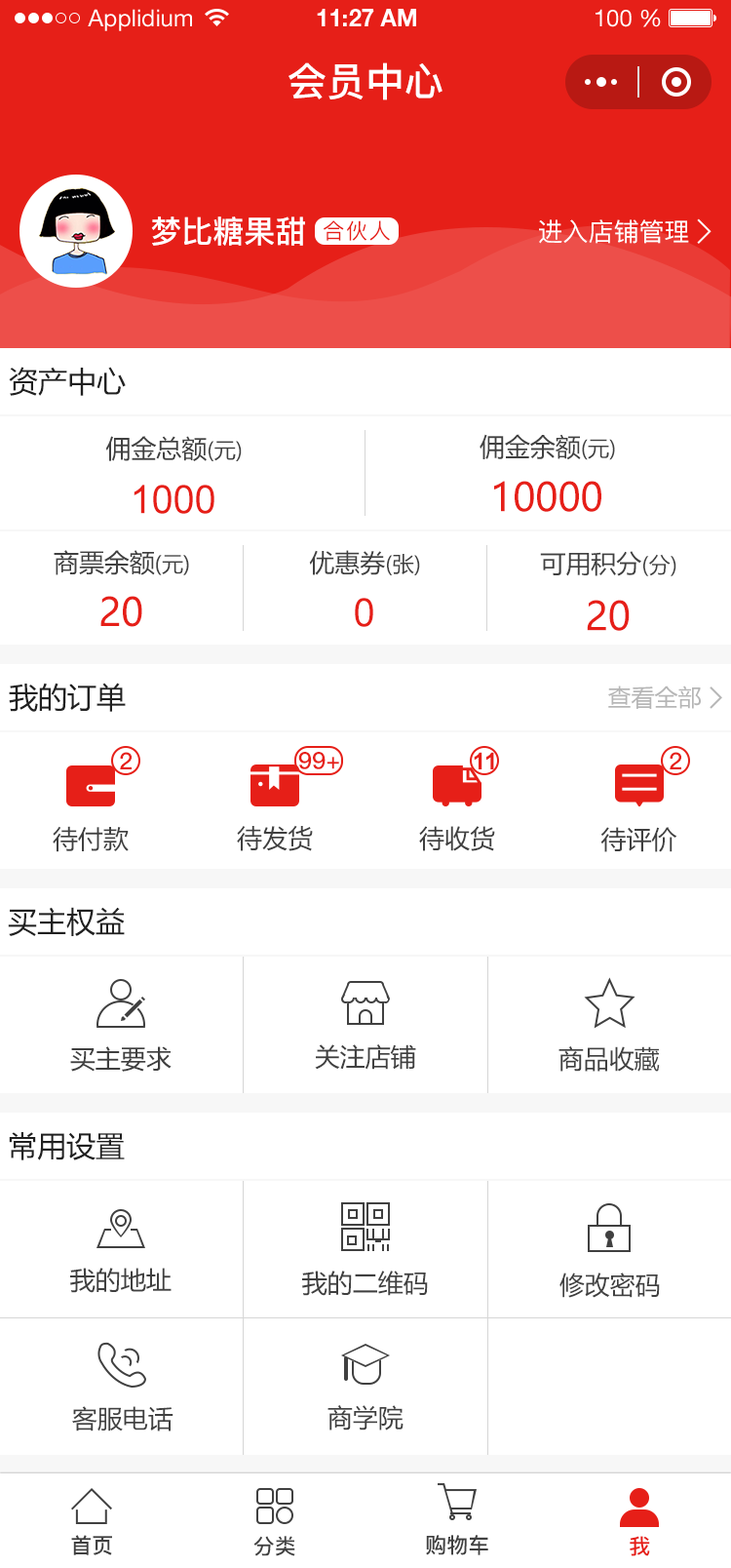
<style>
.page{position:relative;width:731px;height:1568px;background:#ffffff}
.page>*{position:absolute;margin:0}
.t1{font:23.4px "HelveticaNeueLTStd-Roman";color:#ffffff}
.t2{font:23.4px "HelveticaNeueLTStd-Bd";color:#ffffff}
.t3{font:39px "PingFang-SC-Bold";color:#ffffff;text-transform:uppercase}
.t4{font:31.2px "PingFang-SC-Bold";color:#ffffff;text-transform:uppercase}
.t5{font:21.5px "PingFang-SC-Medium";letter-spacing:0.08em;color:#e61f18}
.t6{font:25.4px "PingFang-SC-Medium";color:#ffffff;text-transform:uppercase}
.t7{font:29.3px "MicrosoftYaHei";color:#202020;text-transform:uppercase}
.t8{font:25.4px "MicrosoftYaHei";color:#404040;text-transform:uppercase}
.t9{font:21.5px "MicrosoftYaHei";color:#404040;text-transform:uppercase}
.t10{font:39px "ArialMT";color:#e61f18;text-transform:uppercase}
.t11{font:39px "MicrosoftYaHei";color:#e61f18;text-transform:uppercase}
.t12{font:25.2px "MicrosoftYaHei";color:#404040;text-transform:uppercase}
.t13{font:21.4px "MicrosoftYaHei";color:#404040;text-transform:uppercase}
.t14{font:38.8px "MicrosoftYaHei";color:#e61f18;text-transform:uppercase}
.t15{font:23.4px "MicrosoftYaHei";color:#b6b6b6;text-transform:uppercase}
.t16{font:23.4px "PingFang-SC-Bold";color:#e61f18;text-transform:uppercase}
.t17{font:23.4px "Arial-BoldMT";letter-spacing:-0.05em;color:#e61f18;text-transform:uppercase}
.t18{font:25.3px "MicrosoftYaHei";color:#404040;text-transform:uppercase}
.t19{font:21.5px "PingFang-SC-Bold";color:#404040;text-transform:uppercase}
.t20{font:21.5px "PingFang-SC-Bold";color:#e61f18;text-transform:uppercase}
</style>
<div class="page">
<p class="t1" style="left:88px;top:9px;width:104px;height:22px">Applidium</p>
<p class="t2" style="left:317px;top:9px;width:99px;height:17px">11:27 AM</p>
<p class="t1" style="left:596px;top:9px;width:65px;height:18px">100 %</p>
<p class="t3" style="left:289px;top:62px;width:154px;height:38px">会员中心</p>
<p class="t4" style="left:151px;top:216px;width:154px;height:30px">梦比糖果甜</p>
<p class="t5" style="left:324px;top:220px;width:66px;height:21px">合伙人</p>
<p class="t6" style="left:539px;top:219px;width:150px;height:25px">进入店铺管理</p>
<p class="t7" style="left:9px;top:367px;width:117px;height:29px">资产中心</p>
<p class="t8" style="left:105px;top:436px;width:137px;height:25px">佣金总额<span class="t9">(元)</span></p>
<p class="t8" style="left:480px;top:434px;width:135px;height:26px">佣金余额<span class="t9">(元)</span></p>
<p class="t10" style="left:134px;top:485px;width:81px;height:29px">1000</p>
<p class="t11" style="left:494px;top:481px;width:108px;height:31px">10000</p>
<p class="t12" style="left:54px;top:550px;width:135px;height:25px">商票余额<span class="t13">(元)</span></p>
<p class="t8" style="left:309px;top:550px;width:111px;height:25px">优惠券<span class="t9">(张)</span></p>
<p class="t8" style="left:540px;top:551px;width:137px;height:25px">可用积分<span class="t9">(分)</span></p>
<p class="t14" style="left:100px;top:596px;width:42px;height:31px">20</p>
<p class="t10" style="left:355px;top:598px;width:18px;height:29px">0</p>
<p class="t11" style="left:587px;top:600px;width:43px;height:31px">20</p>
<p class="t7" style="left:9px;top:683px;width:117px;height:29px">我的订单</p>
<p class="t15" style="left:608px;top:686px;width:93px;height:23px">查看全部</p>
<p class="t16" style="left:120px;top:752px;width:12px;height:17px">2</p>
<p class="t16" style="left:298px;top:752px;width:41px;height:17px">99+</p>
<p class="t17" style="left:474px;top:752px;width:20px;height:17px">11</p>
<p class="t16" style="left:670px;top:752px;width:12px;height:17px">2</p>
<p class="t8" style="left:53px;top:826px;width:76px;height:26px">待付款</p>
<p class="t8" style="left:237px;top:825px;width:76px;height:26px">待发货</p>
<p class="t18" style="left:419px;top:826px;width:76px;height:25px">待收货</p>
<p class="t8" style="left:601px;top:827px;width:76px;height:25px">待评价</p>
<p class="t7" style="left:8px;top:907px;width:117px;height:29px">买主权益</p>
<p class="t8" style="left:70px;top:1046px;width:102px;height:26px">买主要求</p>
<p class="t8" style="left:315px;top:1044px;width:101px;height:26px">关注店铺</p>
<p class="t8" style="left:559px;top:1046px;width:101px;height:26px">商品收藏</p>
<p class="t7" style="left:9px;top:1132px;width:116px;height:28px">常用设置</p>
<p class="t8" style="left:70px;top:1268px;width:102px;height:25px">我的地址</p>
<p class="t8" style="left:302px;top:1271px;width:126px;height:25px">我的二维码</p>
<p class="t8" style="left:560px;top:1273px;width:100px;height:25px">修改密码</p>
<p class="t8" style="left:72px;top:1406px;width:102px;height:25px">客服电话</p>
<p class="t8" style="left:328px;top:1405px;width:76px;height:26px">商学院</p>
<p class="t19" style="left:71px;top:1535px;width:41px;height:20px">首页</p>
<p class="t19" style="left:254px;top:1536px;width:41px;height:20px">分类</p>
<p class="t19" style="left:426px;top:1535px;width:63px;height:20px">购物车</p>
<p class="t20" style="left:630px;top:1536px;width:20px;height:20px">我</p>
</div>
